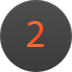
<style>
.page{position:relative;width:72px;height:72px}
.page>*{position:absolute;margin:0}
.t1{font:40px "MyriadPro-Regular";color:#f9642d;font-variant:small-caps}
</style>
<div class="page">
<p class="t1" style="left:27px;top:21px;width:17px;height:26px">2</p>
</div>
